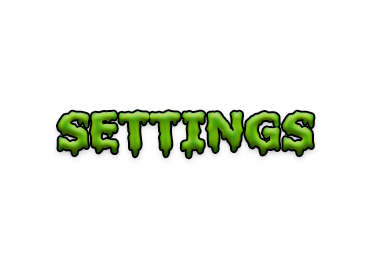
<style>
.page{position:relative;width:370px;height:270px;background:#ffffff}
.page>*{position:absolute;margin:0}
.t1{font:55px "Liquidismpart2"}
</style>
<div class="page">
<p class="t1" style="left:58px;top:111px;width:256px;height:47px">SETTINGS</p>
</div>
